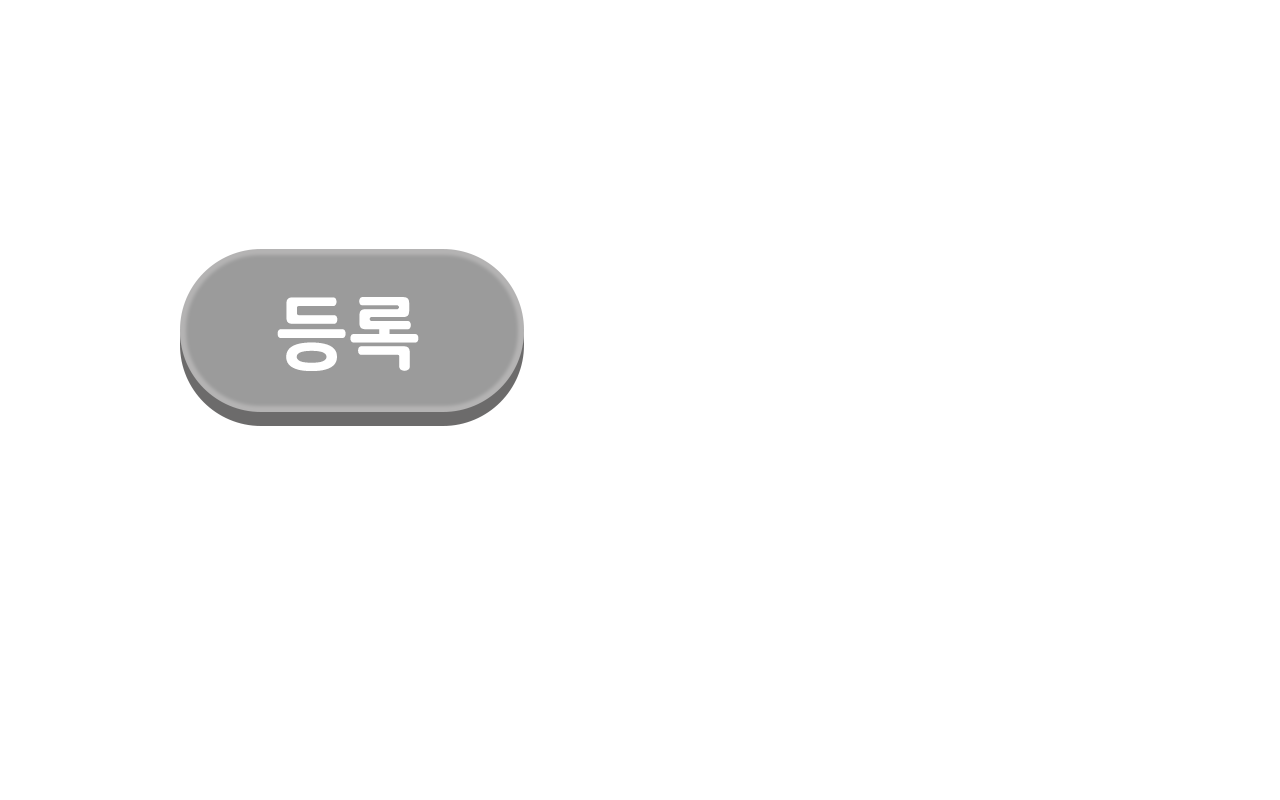
<style>
.page{position:relative;width:1280px;height:800px;background:#ffffff}
.page>*{position:absolute;margin:0}
.t1{font:80px "NanumSquareRoundEB";color:#ffffff}
</style>
<div class="page">
<p class="t1" style="left:277px;top:297px;width:142px;height:74px">등록</p>
</div>
